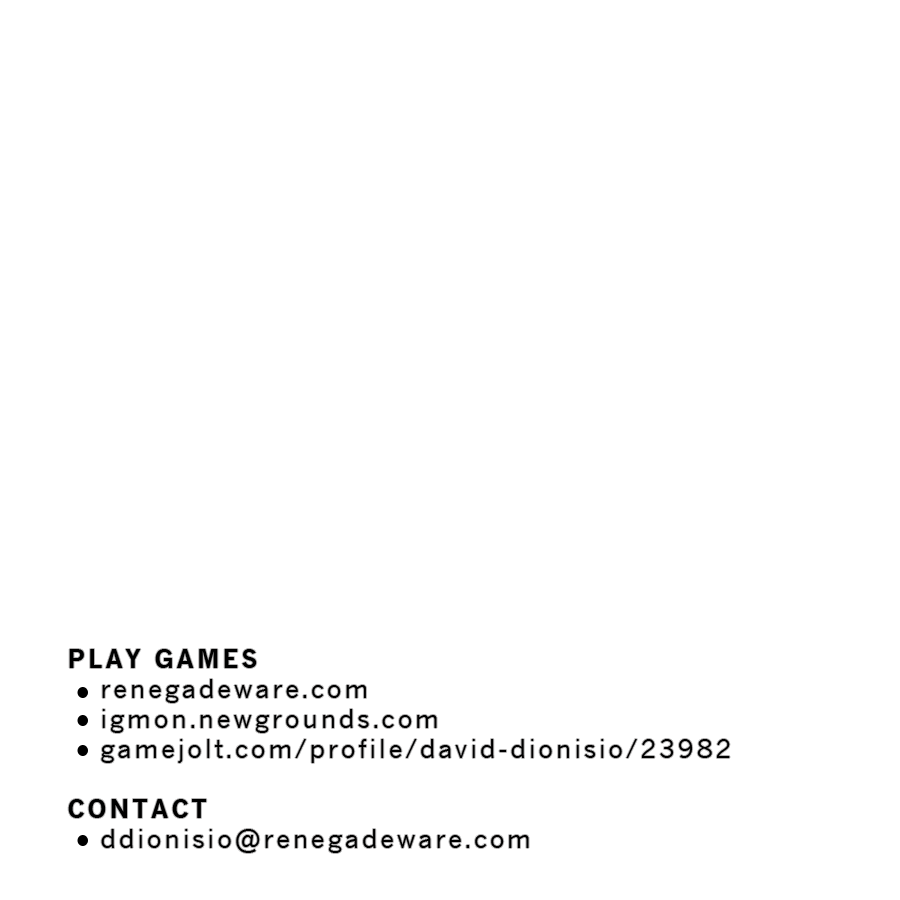
<style>
.page{position:relative;width:900px;height:900px;background:#ffffff}
.page>*{position:absolute;margin:0}
.t1{font:25px "NewsGothic";letter-spacing:0.125em;color:#000000}
.t2{font:25px "NewsGothic-Bold";letter-spacing:0.125em;color:#000000}
</style>
<div class="page">
<p class="t1" style="left:68px;top:649px;width:662px;height:204px"><span class="t2">PLAY GAMES<br></span>   renegadeware.com<br>   igmon.newgrounds.com<br>   gamejolt.com/profile/david-dionisio/23982<br><br><span class="t2">CONTACT<br></span>   ddionisio@renegadeware.com</p>
</div>
